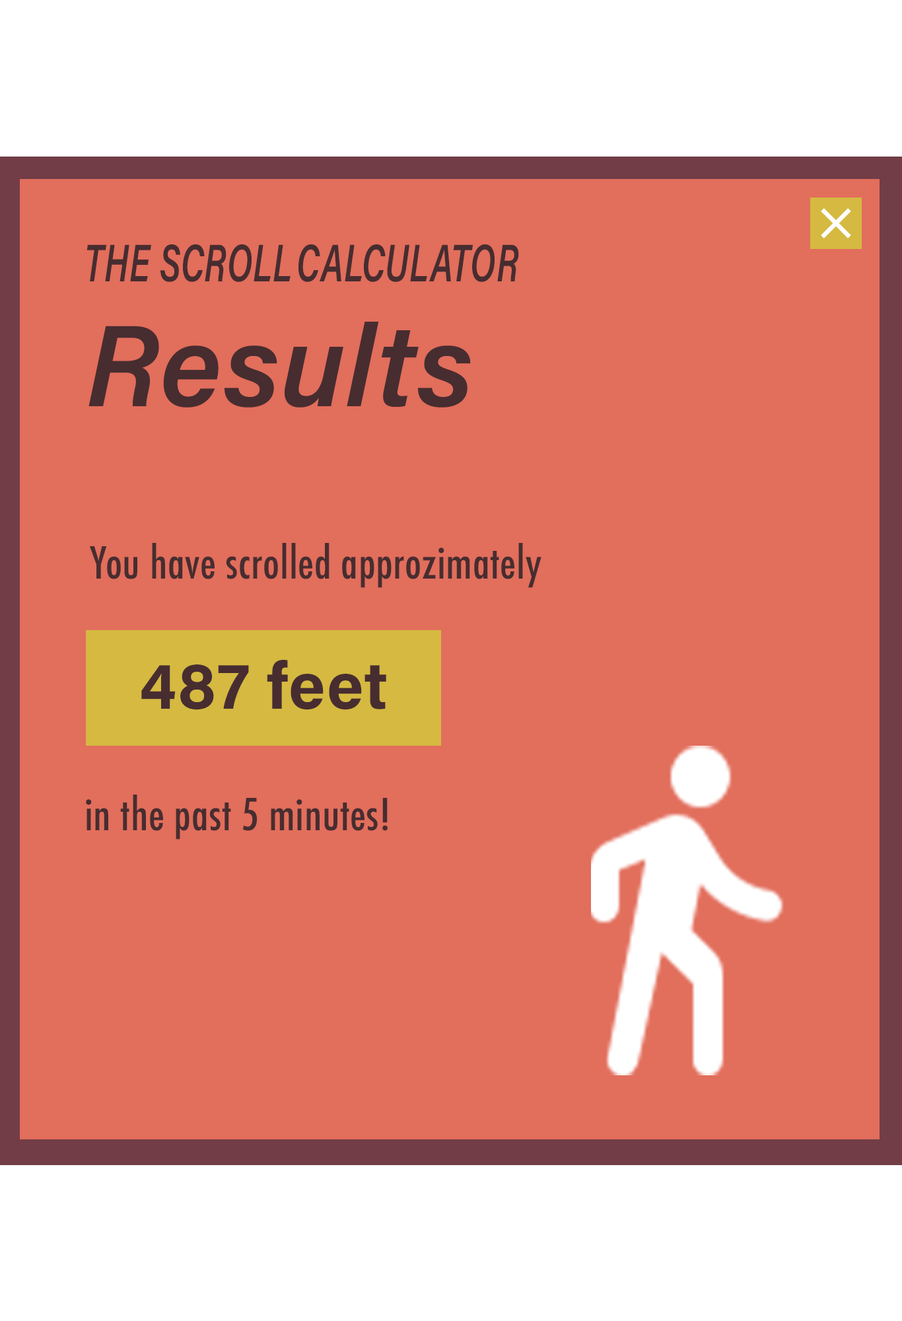
<style>
.page{position:relative;width:902px;height:1321px;background:#e26e5c}
.page>*{position:absolute;margin:0}
.t1{font:52.9px "AcuminConcept-SemiboldItalic";letter-spacing:0.01em;color:#472d30;scale:0.66 1}
.t2{font:115.6px "AcuminConcept-SemiboldItalic";letter-spacing:0.01em;color:#472d30}
.t3{font:42.9px "Futura-CondensedMedium";letter-spacing:0.01em;color:#472d30}
.t4{font:66.1px "AcuminConcept-Bold";letter-spacing:0.01em;color:#472d30}
</style>
<div class="page">
<p class="t1" style="left:87px;top:244px;width:432px;height:38px">THE SCROLL CALCULATOR</p>
<p class="t2" style="left:89px;top:322px;width:382px;height:86px">Results</p>
<p class="t3" style="left:90px;top:543px;width:452px;height:45px">You have scrolled approzimately</p>
<p class="t4" style="left:141px;top:660px;width:245px;height:50px">487 feet</p>
<p class="t3" style="left:86px;top:795px;width:302px;height:45px">in the past 5 minutes!</p>
</div>
